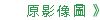
<style>
.page{position:relative;width:100px;height:20px;background:#ffffff}
.page>*{position:absolute;margin:0}
.t1{font:14px "MicrosoftJhengHeiRegular";letter-spacing:0.1em;color:#32974f}
</style>
<div class="page">
<p class="t1" style="left:27px;top:4px;width:58px;height:13px">原影像圖</p>
</div>
